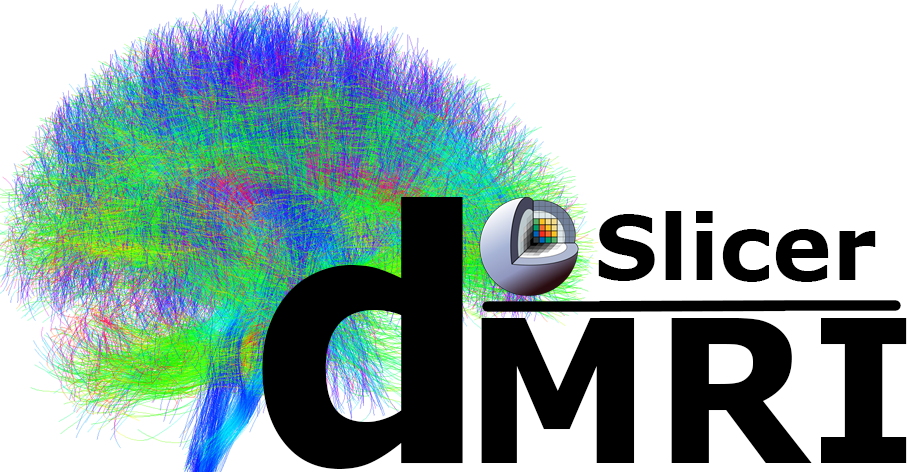
<style>
.page{position:relative;width:907px;height:472px;background:#ffffff}
.page>*{position:absolute;margin:0}
.t1{font:350px "Verdana-Bold";color:#000000}
.t2{font:90px "Verdana-Bold";color:#000000}
.t3{font:200px "Verdana-Bold";color:#000000}
</style>
<div class="page">
<p class="t1" style="left:262px;top:197px;width:201px;height:272px">d</p>
<p class="t2" style="left:598px;top:211px;width:278px;height:71px">Slicer</p>
<p class="t3" style="left:481px;top:318px;width:426px;height:145px">MRI</p>
</div>
